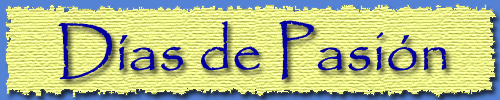
<style>
.page{position:relative;width:500px;height:100px}
.page>*{position:absolute;margin:0}
.t1{font:60px "Papyrus-Regular";color:#04009f}
</style>
<div class="page">
<p class="t1" style="left:58px;top:20px;width:389px;height:60px">Días de Pasión</p>
</div>
